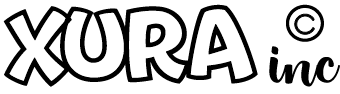
<style>
.page{position:relative;width:340px;height:94px;background:#ffffff}
.page>*{position:absolute;margin:0}
.t1{font:90px "Bouncy-PERSONALUSEONLY";letter-spacing:-0.02em;color:#000000;font-weight:bold;scale:1.03 1}
.t2{font:75px "AutomaticRegular";letter-spacing:-0.02em;color:#000000;font-weight:bold;scale:1.03 1}
.t3{font:40px "AutomaticRegular";letter-spacing:-0.02em;color:#000000;font-weight:bold;scale:1.03 1}
.t4{font:60px "BabeRegular";letter-spacing:-0.02em;color:#000000;font-weight:bold;scale:1.03 1}
</style>
<div class="page">
<p class="t1" style="left:3px;top:4px;width:255px;height:83px">xura</p>
<p class="t2" style="left:286px;top:4px;width:38px;height:38px">o</p>
<p class="t3" style="left:294px;top:14px;width:21px;height:21px">c</p>
<p class="t4" style="left:269px;top:46px;width:71px;height:41px">inc</p>
</div>
